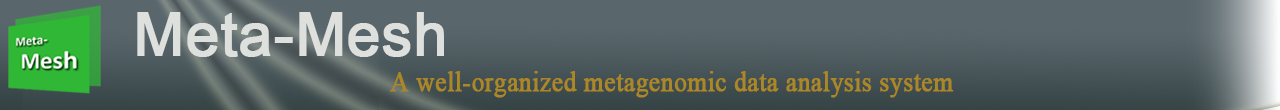
<style>
.page{position:relative;width:1280px;height:110px}
.page>*{position:absolute;margin:0}
.t1{font:60px "ArialMT";color:#dde0dd;font-weight:bold}
.t2{font:28px "TimesNewRomanPSMT";color:#ab8725;font-weight:bold;scale:0.9 1}
</style>
<div class="page">
<p class="t1" style="left:137px;top:12px;width:307px;height:45px">Meta-Mesh</p>
<p class="t2" style="left:390px;top:71px;width:564px;height:27px">A well-organized metagenomic data analysis system</p>
</div>
